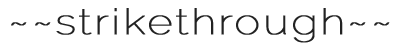
<style>
.page{position:relative;width:400px;height:53px;background:#ffffff}
.page>*{position:absolute;margin:0}
.t1{font:35.8px "Raleway-Thin";letter-spacing:0.05em;color:#222222;font-weight:bold;scale:1.2 1}
</style>
<div class="page">
<p class="t1" style="left:11px;top:8px;width:379px;height:35px">~~strikethrough~~</p>
</div>
